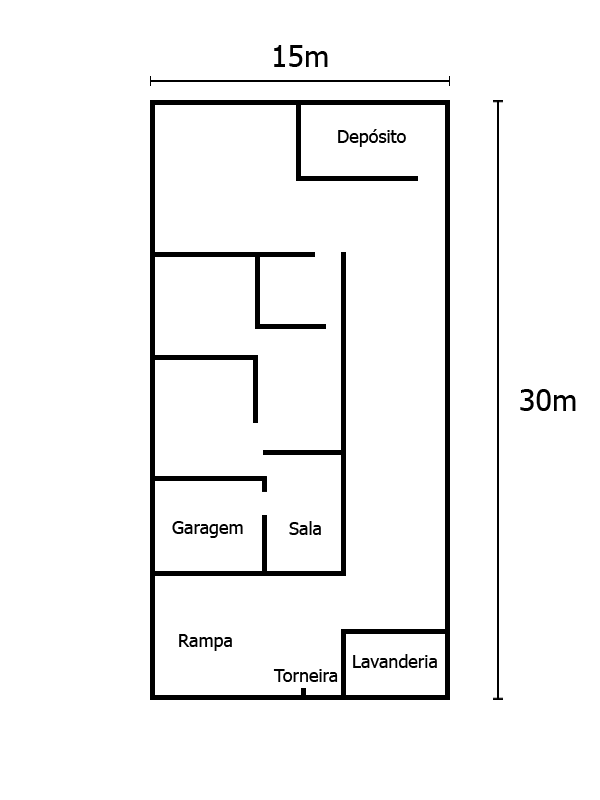
<style>
.page{position:relative;width:600px;height:800px;background:#ffffff}
.page>*{position:absolute;margin:0}
.t1{font:30px "Tahoma";color:#000000}
.t2{font:18px "Tahoma";color:#000000}
</style>
<div class="page">
<p class="t1" style="left:274px;top:45px;width:54px;height:22px">15m</p>
<p class="t2" style="left:338px;top:129px;width:68px;height:18px">Depósito</p>
<p class="t1" style="left:520px;top:389px;width:56px;height:22px">30m</p>
<p class="t2" style="left:172px;top:521px;width:71px;height:17px">Garagem</p>
<p class="t2" style="left:289px;top:521px;width:32px;height:14px">Sala</p>
<p class="t2" style="left:179px;top:634px;width:53px;height:17px">Rampa</p>
<p class="t2" style="left:353px;top:654px;width:84px;height:14px">Lavanderia</p>
<p class="t2" style="left:273px;top:669px;width:65px;height:13px">Torneira</p>
</div>
